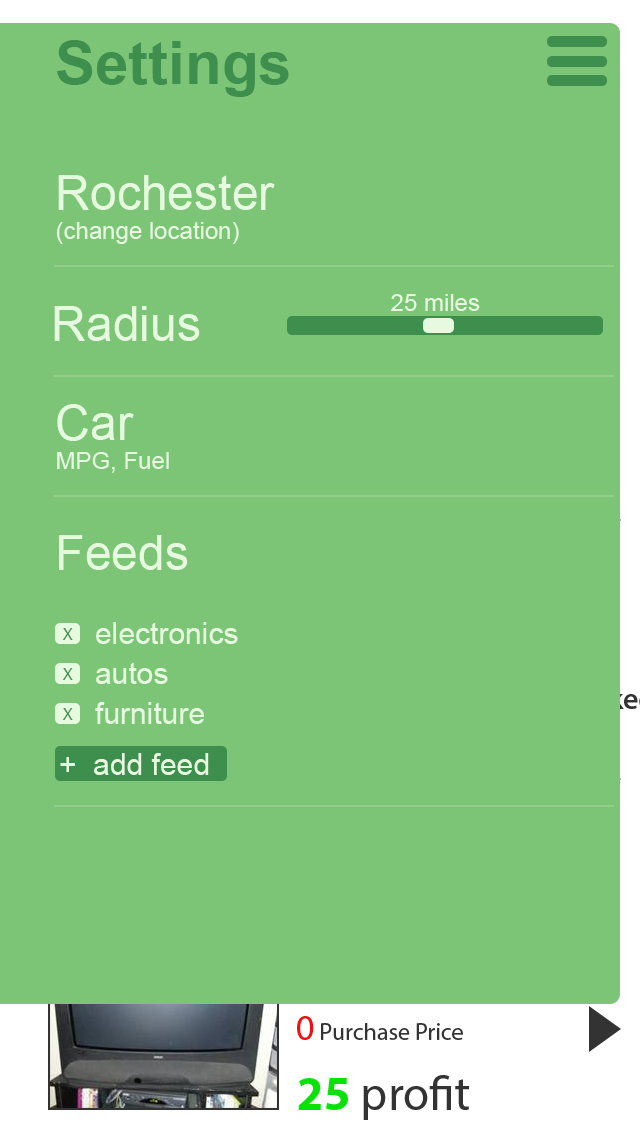
<style>
.page{position:relative;width:640px;height:1136px;background:#7cc576}
.page>*{position:absolute;margin:0}
.t1{font:60px "Arial-BoldMT";color:#3e8e4e}
.t2{font:24px "ArialMT";color:#e6fadf}
.t3{font:48px "ArialMT";color:#e6fadf}
.t4{font:15.6px "ArialMT";color:#3e8e4e}
.t5{font:30px "ArialMT";color:#e6fadf}
</style>
<div class="page">
<p class="t1" style="left:57px;top:40px;width:232px;height:57px">Settings</p>
<p class="t2" style="left:56px;top:175px;width:219px;height:69px"><span class="t3">Rochester<br></span>(change location)</p>
<p class="t2" style="left:391px;top:294px;width:89px;height:17px">25 miles</p>
<p class="t3" style="left:54px;top:306px;width:146px;height:35px">Radius</p>
<p class="t2" style="left:57px;top:404px;width:112px;height:69px"><span class="t3">Car<br></span>MPG, Fuel</p>
<p class="t3" style="left:59px;top:535px;width:129px;height:35px">Feeds</p>
<p class="t4" style="left:62px;top:628px;width:11px;height:12px">X</p>
<p class="t5" style="left:96px;top:622px;width:142px;height:22px">electronics</p>
<p class="t5" style="left:96px;top:662px;width:72px;height:22px">autos</p>
<p class="t4" style="left:62px;top:668px;width:11px;height:12px">X</p>
<p class="t5" style="left:95px;top:702px;width:109px;height:22px">furniture</p>
<p class="t4" style="left:62px;top:708px;width:11px;height:12px">X</p>
<p class="t5" style="left:60px;top:753px;width:149px;height:22px">+  add feed</p>
</div>
